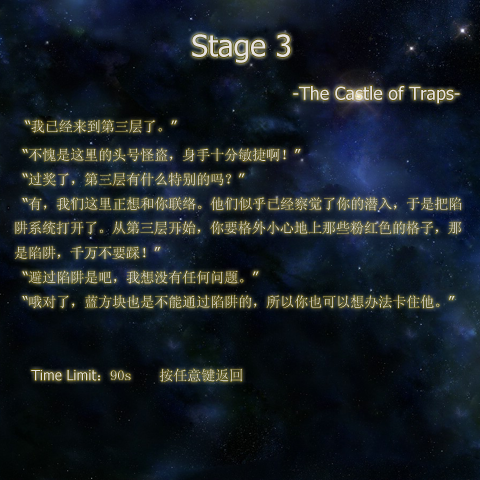
<style>
.page{position:relative;width:480px;height:480px}
.page>*{position:absolute;margin:0}
.t1{font:14px "SimSun";color:#e4e1e1}
.t2{font:24px "Tahoma";color:#e4e1e1}
.t3{font:30px "Tahoma";color:#e4e1e1}
.t4{font:18px "Tahoma";color:#e4e1e1}
.t5{font:14px "Tahoma";color:#e4e1e1}
</style>
<div class="page">
<p class="t1" style="left:15px;top:34px;width:447px;height:348px"><span class="t2"><br></span><span class="t3">Stage 3<br></span><span class="t4">                                                -The Castle of Traps-<br>  </span><span class="t5">“</span>我已经来到第三层了。<span class="t5">”<br>  “</span>不愧是这里的头号怪盗，身手十分敏捷啊！<span class="t5">”<br>  “</span>过奖了，第三层有什么特别的吗？<span class="t5">”<br>  “</span>有，我们这里正想和你联络。他们似乎已经察觉了你的潜入，于是把陷阱系统打开了。从第三层开始，你要格外小心地上那些粉红色的格子，那是陷阱，千万不要踩！<span class="t5">”<br>  “</span>避过陷阱是吧，我想没有任何问题。<span class="t5">”<br>  “</span>哦对了，蓝方块也是不能通过陷阱的，所以你也可以想办法卡住他。<span class="t5">”<br><br><br>    Time Limit</span>：90s    按任意键返回</p>
</div>
